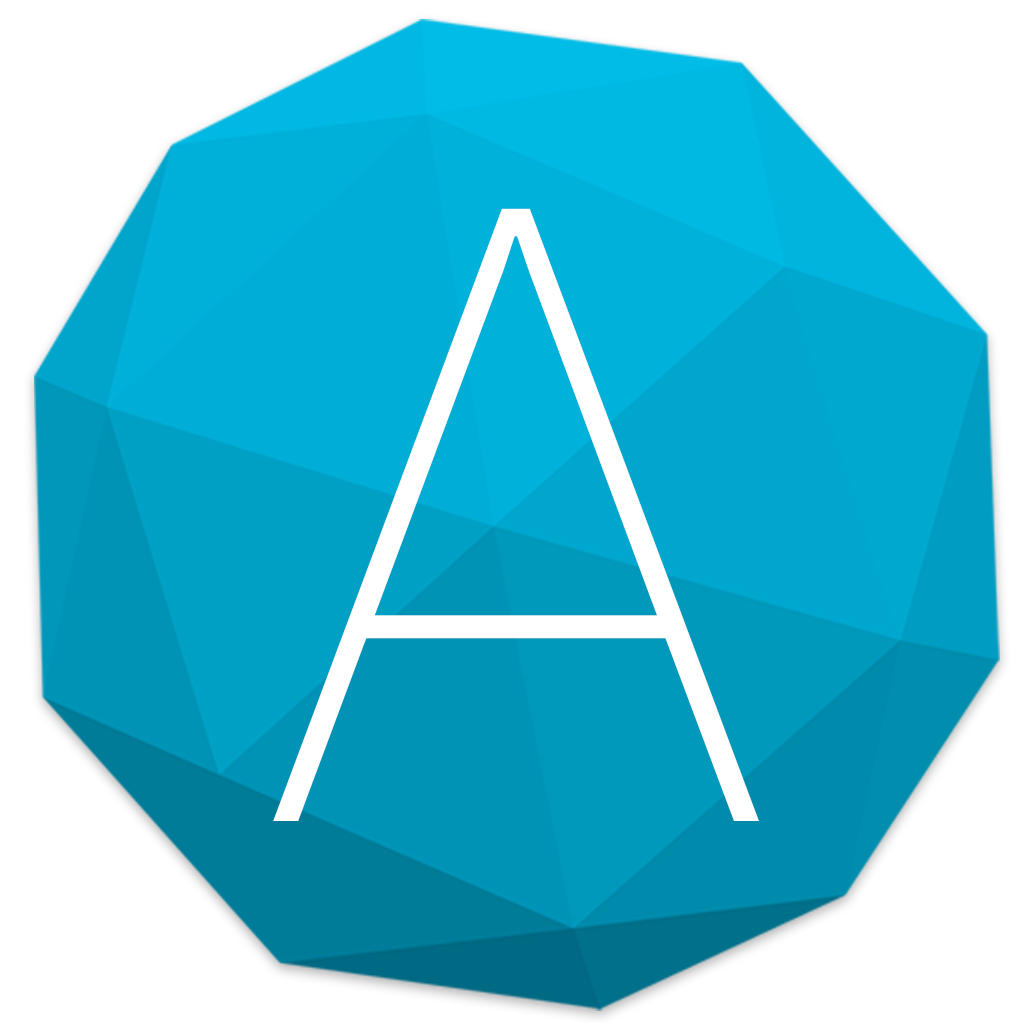
<style>
.page{position:relative;width:1024px;height:1024px;background:#ffffff}
.page>*{position:absolute;margin:0}
.t1{font:861.2px "Roboto-Thin";color:#ffffff}
</style>
<div class="page">
<p class="t1" style="left:273px;top:208px;width:486px;height:613px">A</p>
</div>
